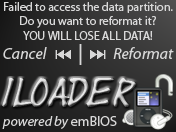
<style>
.page{position:relative;width:176px;height:132px}
.page>*{position:absolute;margin:0}
.t1{font:12px "MyriadPro-Regular";color:#d8d8d8}
.t2{font:16px "MyriadPro-It";color:#d8d8d8}
.t3{font:30px "Yearsupplyoffairycakes"}
.t4{font:14px "MyriadPro-It";color:#d8d8d8}
.t5{font:14px "MyriadPro-Regular";color:#d8d8d8}
</style>
<div class="page">
<p class="t1" style="left:3px;top:2px;width:171px;height:57px;text-align:center">Failed to access the data partition.<br>Do you want to reformat it?<br>YOU WILL LOSE ALL DATA!<br><span class="t2">Cancel                       Reformat</span></p>
<p class="t3" style="left:2px;top:78px;width:134px;height:29px">iLoader</p>
<p class="t4" style="left:2px;top:116px;width:115px;height:13px">powered by<span class="t5"> emBIOS</span></p>
</div>
